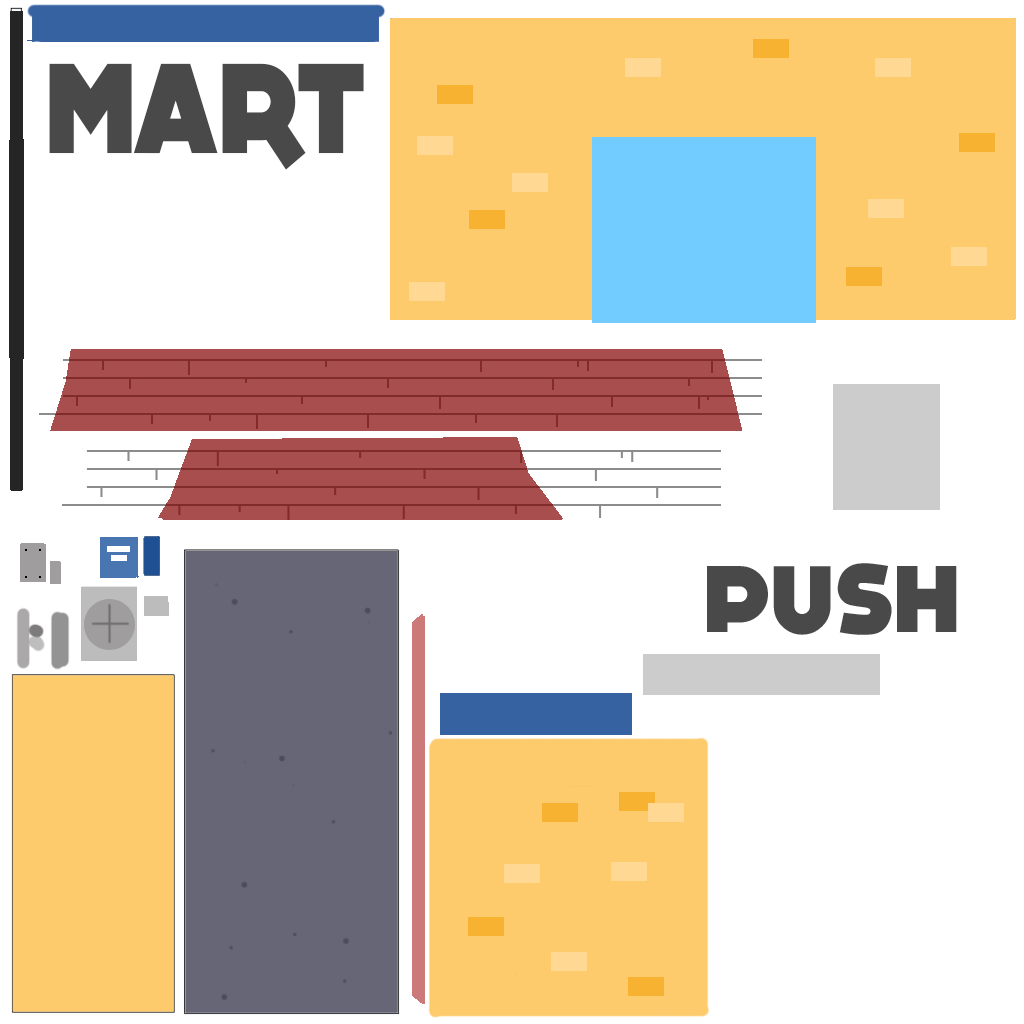
<style>
.page{position:relative;width:1024px;height:1024px;background:#ffffff}
.page>*{position:absolute;margin:0}
.t1{font:128.5px "DOCK11-Heavy";color:#4a4949;scale:0.88 1}
.t2{font:95px "DOCK11-Heavy";color:#494949}
</style>
<div class="page">
<p class="t1" style="left:49px;top:63px;width:315px;height:107px">MART</p>
<p class="t2" style="left:707px;top:563px;width:250px;height:72px">PUSH</p>
</div>
